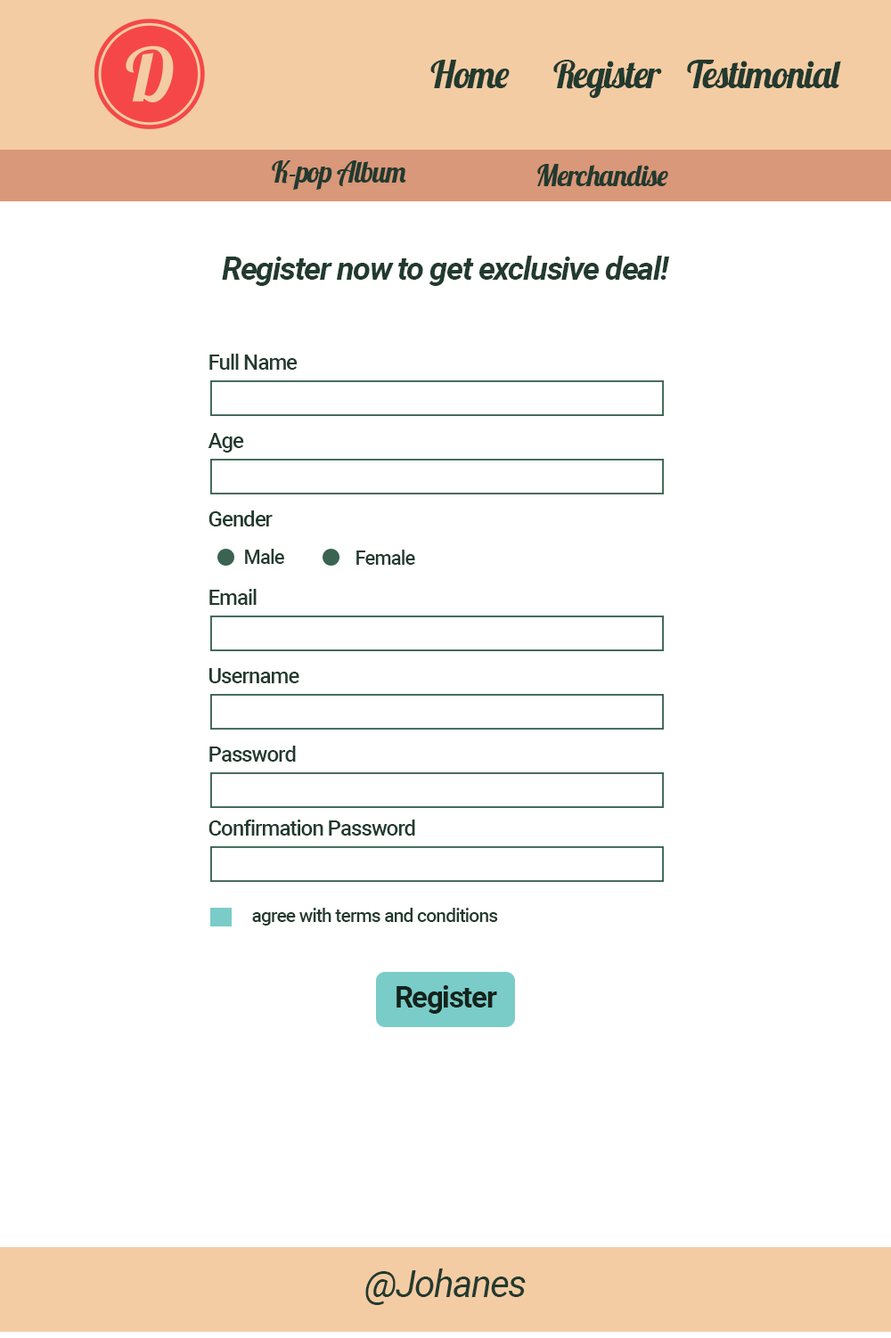
<style>
.page{position:relative;width:891px;height:1338px;background:#ffffff}
.page>*{position:absolute;margin:0}
.t1{font:37.4px "Lobster-Regular";letter-spacing:-0.04em;color:#223a2f}
.t2{font:28.7px "Lobster-Regular";letter-spacing:-0.04em;color:#223a2f}
.t3{font:32.1px "Roboto-BoldItalic";letter-spacing:-0.04em;color:#223a2f}
.t4{font:21.4px "Roboto-Medium";letter-spacing:-0.04em;color:#223a2f}
.t5{font:19.6px "Roboto-Medium";letter-spacing:-0.04em;color:#223a2f}
.t6{font:18.7px "Roboto-Medium";letter-spacing:-0.04em;color:#223a2f}
.t7{font:29.4px "Roboto-Bold";letter-spacing:-0.04em;color:#14231c}
.t8{font:37.4px "Roboto-Italic";letter-spacing:-0.04em;color:#223a2f}
</style>
<div class="page">
<p class="t1" style="left:430px;top:60px;width:80px;height:28px">Home</p>
<p class="t1" style="left:553px;top:60px;width:109px;height:38px">Register</p>
<p class="t1" style="left:687px;top:60px;width:154px;height:28px">Testimonial</p>
<p class="t2" style="left:272px;top:160px;width:134px;height:30px">K-pop Album</p>
<p class="t2" style="left:537px;top:164px;width:131px;height:22px">Merchandise</p>
<p class="t3" style="left:222px;top:256px;width:448px;height:30px">Register now to get exclusive deal!</p>
<p class="t4" style="left:209px;top:354px;width:89px;height:16px">Full Name</p>
<p class="t4" style="left:208px;top:433px;width:36px;height:20px">Age</p>
<p class="t4" style="left:208px;top:511px;width:65px;height:16px">Gender</p>
<p class="t5" style="left:245px;top:549px;width:39px;height:15px">Male</p>
<p class="t5" style="left:356px;top:550px;width:59px;height:15px">Female</p>
<p class="t4" style="left:209px;top:589px;width:48px;height:16px">Email</p>
<p class="t4" style="left:209px;top:668px;width:90px;height:15px">Username</p>
<p class="t4" style="left:209px;top:746px;width:87px;height:16px">Password</p>
<p class="t4" style="left:208px;top:820px;width:207px;height:16px">Confirmation Password</p>
<p class="t6" style="left:252px;top:908px;width:246px;height:18px">agree with terms and conditions</p>
<p class="t7" style="left:396px;top:985px;width:101px;height:29px">Register</p>
<p class="t8" style="left:365px;top:1269px;width:161px;height:36px">@Johanes</p>
</div>
